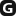
<style>
.page{position:relative;width:16px;height:16px;background:#141414}
.page>*{position:absolute;margin:0}
.t1{font:12.1px "AdobeGothicStd-Bold";color:#ffffff;scale:1.33 1}
</style>
<div class="page">
<p class="t1" style="left:3px;top:3px;width:10px;height:10px">G</p>
</div>
